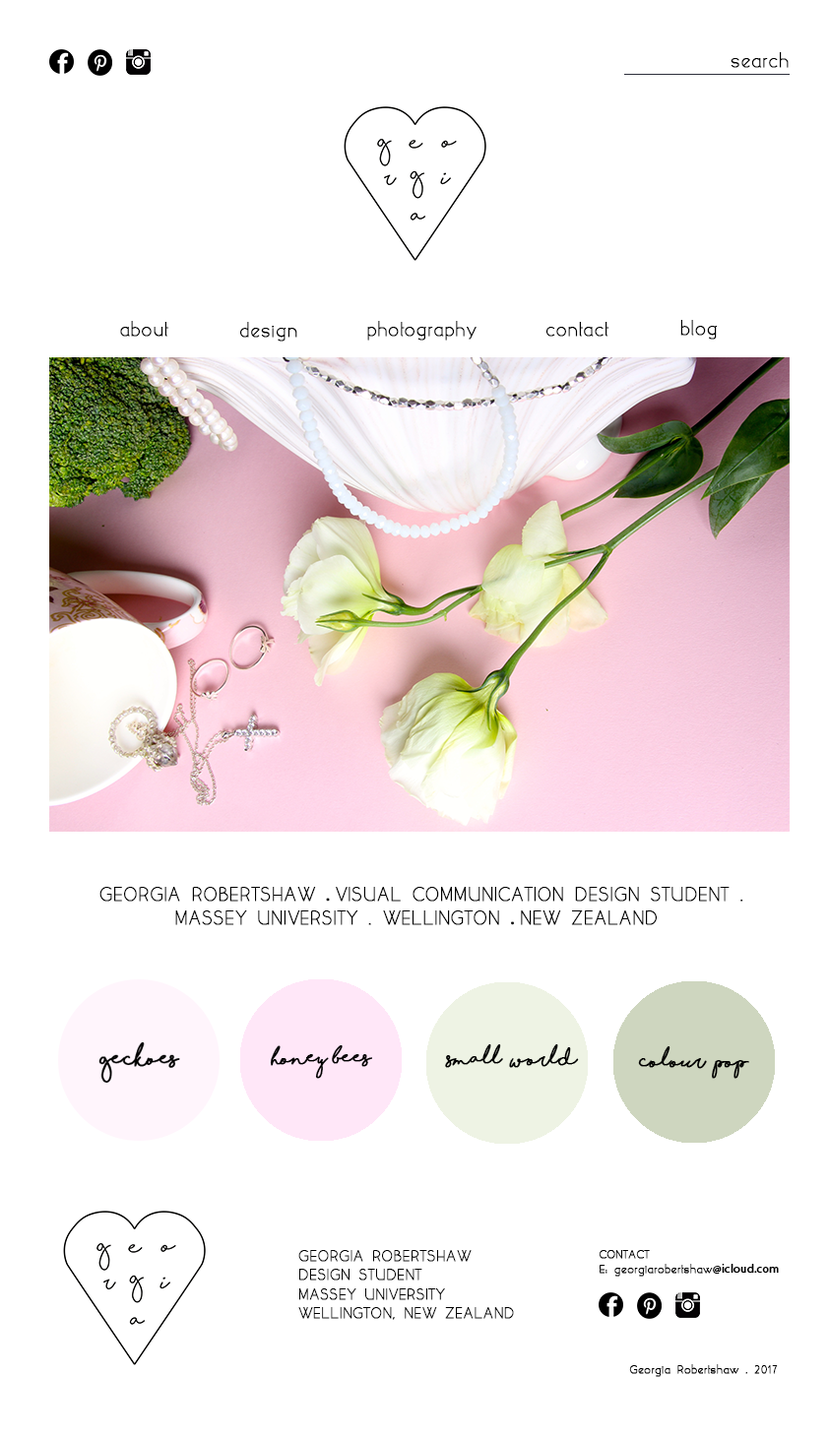
<style>
.page{position:relative;width:829px;height:1438px;background:#ffffff}
.page>*{position:absolute;margin:0}
.t1{font:19.7px "yellowpeasdemo";color:#000000;font-weight:bold}
.t2{font:19.7px "MyriadPro-Regular";color:#000000;font-weight:bold}
.t3{font:17.7px "ShorelinesScriptBold";color:#000000;font-weight:bold}
.t4{font:15.8px "yellowpeasdemo";color:#000000;font-weight:bold}
.t5{font:11.8px "yellowpeasdemo";color:#000000;font-weight:bold}
.t6{font:11.8px "MyriadPro-Regular";color:#000000;font-weight:bold}
</style>
<div class="page">
<p class="t1" style="left:731px;top:52px;width:58px;height:16px">search</p>
<p class="t1" style="left:120px;top:321px;width:48px;height:16px">about</p>
<p class="t1" style="left:240px;top:322px;width:57px;height:20px">design</p>
<p class="t1" style="left:367px;top:321px;width:110px;height:20px">photography</p>
<p class="t1" style="left:545px;top:322px;width:64px;height:15px">contact</p>
<p class="t1" style="left:680px;top:320px;width:37px;height:20px">blog</p>
<p class="t1" style="left:99px;top:887px;width:644px;height:38px">GEORGIA ROBERTSHAW <span class="t2">. </span>VISUAL COMMUNICATION DESIGN STUDENT .<br>                MASSEY UNIVERSITY . WELLINGTON <span class="t2">. </span>NEW ZEALAND</p>
<p class="t3" style="left:270px;top:1046px;width:102px;height:33px">honey bees</p>
<p class="t3" style="left:445px;top:1045px;width:134px;height:23px">small  world</p>
<p class="t3" style="left:638px;top:1047px;width:111px;height:32px">colour  pop</p>
<p class="t4" style="left:298px;top:1250px;width:216px;height:70px">GEORGIA ROBERTSHAW<br>DESIGN STUDENT<br>MASSEY UNIVERSITY<br>WELLINGTON, NEW ZEALAND</p>
<p class="t5" style="left:599px;top:1250px;width:180px;height:27px">CONTACT<br>E: georgiarobertshaw<span class="t6">@icloud.com</span></p>
<p class="t5" style="left:629px;top:1365px;width:149px;height:12px">Georgia Robertshaw . 2017</p>
</div>
